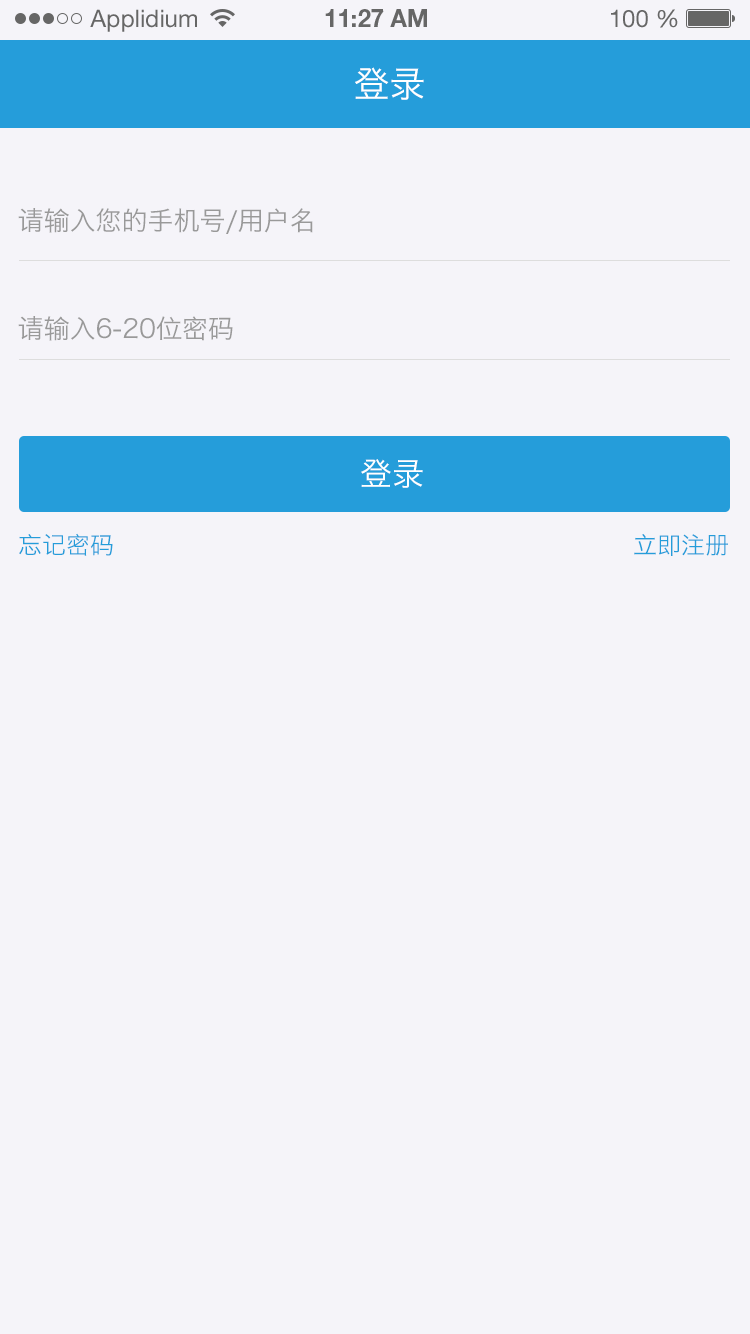
<style>
.page{position:relative;width:750px;height:1334px;background:#f5f4f9}
.page>*{position:absolute;margin:0}
.t1{font:24px "HelveticaNeueLTStd-Roman";color:#666666}
.t2{font:24px "HelveticaNeueLTStd-Bd";color:#666666}
.t3{font:36px "HiraginoSansGB-W3";color:#ffffff;text-transform:uppercase}
.t4{font:26px "HiraginoSansGB-W3";color:#999999;text-transform:uppercase}
.t5{font:32px "HiraginoSansGB-W3";color:#ffffff;text-transform:uppercase}
.t6{font:24px "HiraginoSansGB-W3";color:#259dda;text-transform:uppercase}
</style>
<div class="page">
<p class="t1" style="left:90px;top:9px;width:107px;height:23px">Applidium</p>
<p class="t2" style="left:325px;top:9px;width:102px;height:18px">11:27 AM</p>
<p class="t1" style="left:611px;top:9px;width:67px;height:19px">100 %</p>
<p class="t3" style="left:355px;top:67px;width:69px;height:33px">登录</p>
<p class="t4" style="left:18px;top:208px;width:295px;height:26px">请输入您的手机号/用户名</p>
<p class="t4" style="left:18px;top:316px;width:215px;height:25px">请输入6-20位密码</p>
<p class="t5" style="left:361px;top:459px;width:62px;height:29px">登录</p>
<p class="t6" style="left:19px;top:533px;width:94px;height:23px">忘记密码</p>
<p class="t6" style="left:634px;top:534px;width:94px;height:22px">立即注册</p>
</div>
